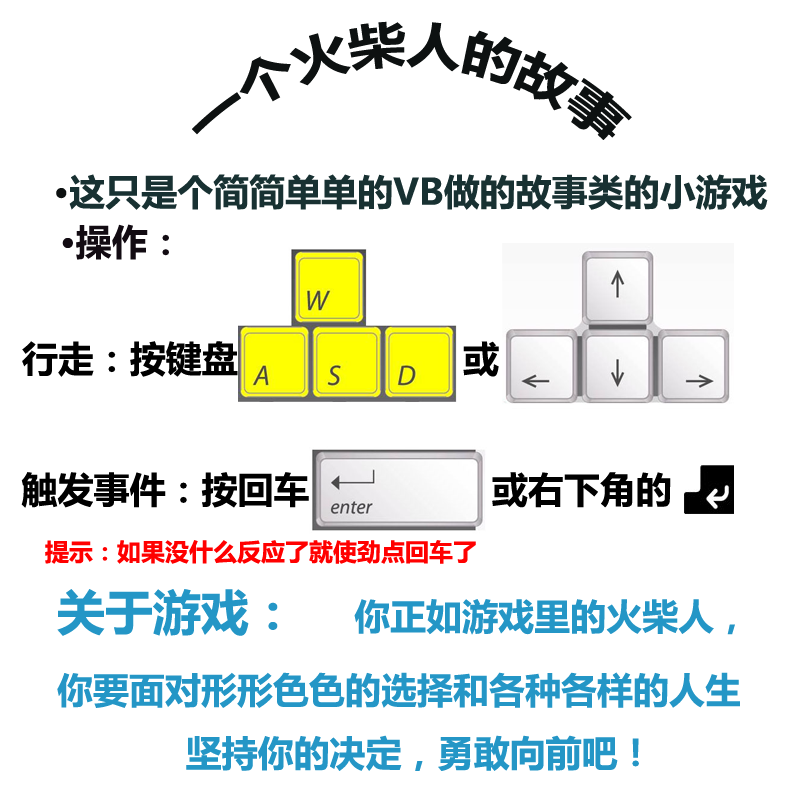
<style>
.page{position:relative;width:800px;height:800px;background:#ffffff}
.page>*{position:absolute;margin:0}
.t1{font:48px "MicrosoftYaHei-Bold";color:#0d1111}
.t2{font:36px "MicrosoftYaHei-Bold";color:#183132}
.t3{font:36px "MicrosoftYaHei-Bold";color:#0d1111}
.t4{font:36px "MicrosoftYaHei-Bold";color:#120b12}
.t5{font:36px "MicrosoftYaHei-Bold";color:#000000}
.t6{font:24px "MicrosoftYaHei-Bold";color:#ff0000}
.t7{font:36px "MicrosoftYaHei-Bold";color:#2496c6}
.t8{font:48px "MicrosoftYaHei-Bold";color:#2496c6}
</style>
<div class="page">
<p class="t1" style="left:192px;top:21px;width:440px;height:119px">一个火柴人的故事</p>
<p class="t2" style="left:56px;top:174px;width:712px;height:36px"><span class="t3">·</span>这只是个简简单单的VB做的故事类的小游戏</p>
<p class="t4" style="left:62px;top:224px;width:107px;height:36px">·操作：</p>
<p class="t5" style="left:22px;top:341px;width:477px;height:36px">行走：按键盘                     或</p>
<p class="t5" style="left:21px;top:472px;width:650px;height:36px">触发事件：按回车                 或右下角的</p>
<p class="t6" style="left:45px;top:540px;width:431px;height:24px">提示：如果没什么反应了就使劲点回车了</p>
<p class="t7" style="left:57px;top:589px;width:683px;height:182px"><span class="t8">关于游戏：    </span>你正如游戏里的火柴人，<br>你要面对形形色色的选择和各种各样的人生<br>            坚持你的决定，勇敢向前吧！</p>
</div>
